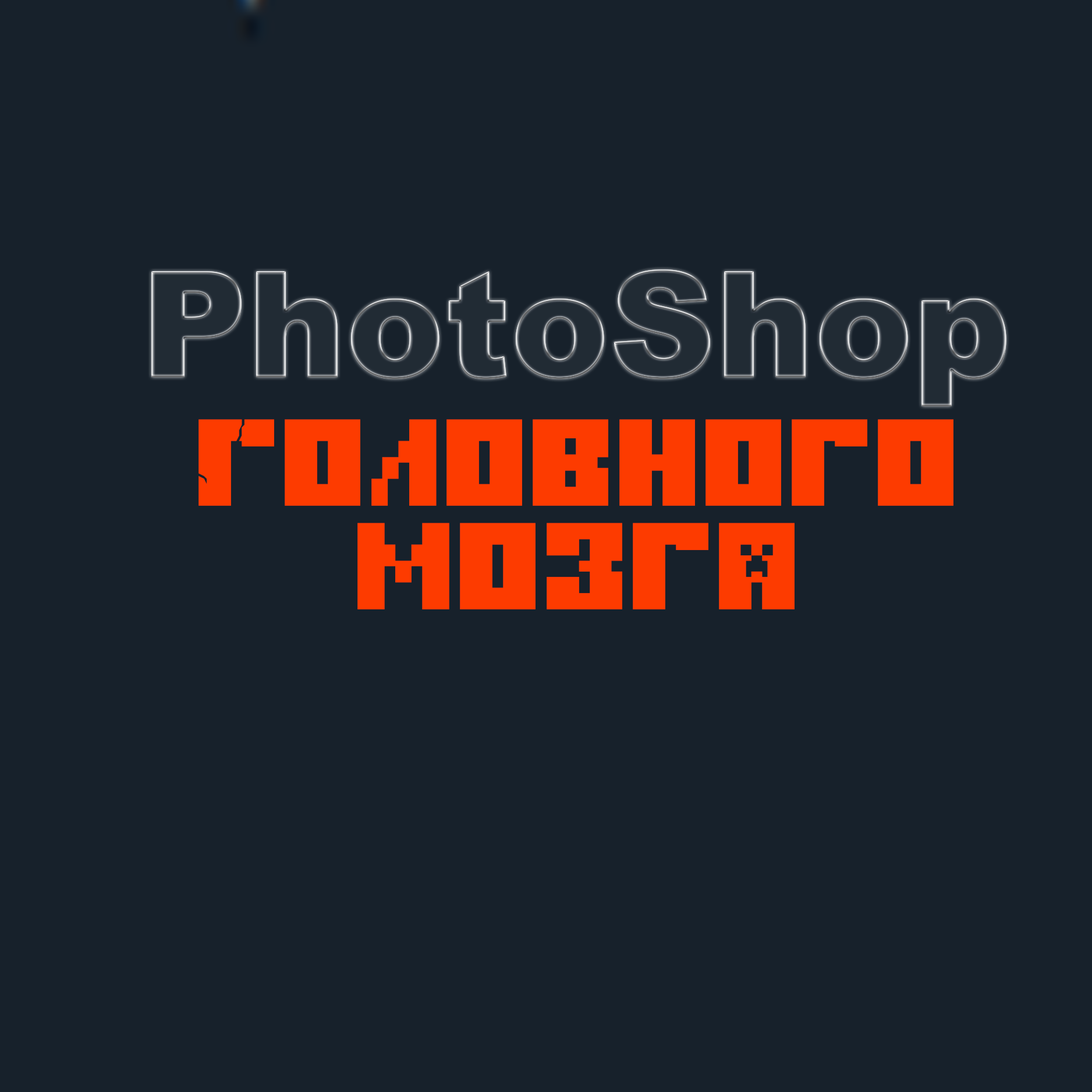
<style>
.page{position:relative;width:1092px;height:1092px;background:#17212b}
.page>*{position:absolute;margin:0}
.t1{font:147.8px "Arial-Black";color:#212b34}
.t2{font:86.2px "Minecraft-Title-Cyrillic";color:#fd3b00}
</style>
<div class="page">
<p class="t1" style="left:151px;top:270px;width:855px;height:136px">PhotoShop</p>
<p class="t1" style="left:151px;top:270px;width:855px;height:136px">PhotoShop</p>
<p class="t2" style="left:198px;top:419px;width:755px;height:190px;text-align:center">Головного мозга</p>
</div>
